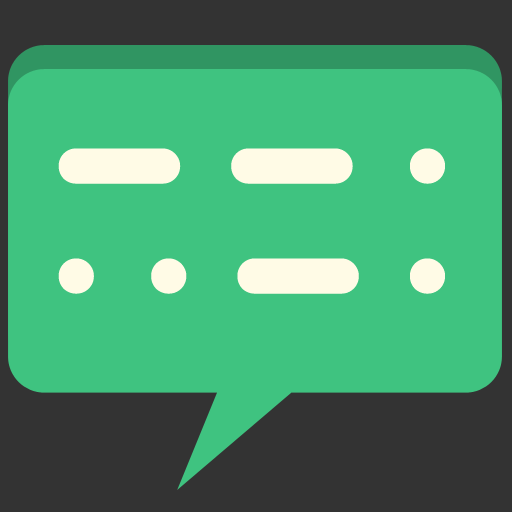
<style>
.page{position:relative;width:512px;height:512px;background:#3fc380}
.page>*{position:absolute;margin:0}
.t1{font:230px/110px "morse";color:#fffbe6;font-weight:bold}
</style>
<div class="page">
<p class="t1" style="left:58px;top:148px;width:387px;height:146px;text-align:center">ME<br>ER</p>
</div>
